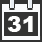
<style>
.page{position:relative;width:42px;height:42px;background:#333333}
.page>*{position:absolute;margin:0}
.t1{font:22px "Arial-Black";color:#ffffff}
</style>
<div class="page">
<p class="t1" style="left:7px;top:16px;width:26px;height:16px">31</p>
</div>
